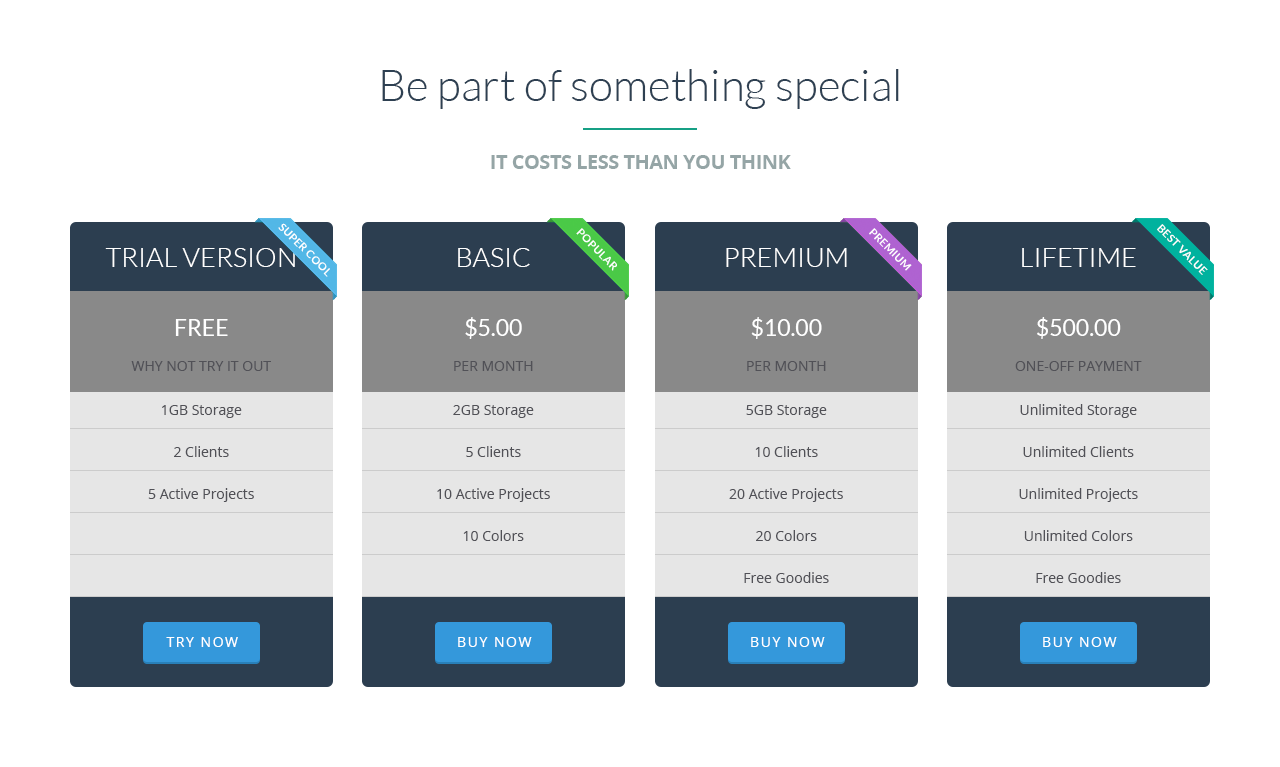
<style>
.page{position:relative;width:1280px;height:767px;background:#ffffff}
.page>*{position:absolute;margin:0}
.t1{font:44px "Lato-Light";color:#2e4052}
.t2{font:20px "OpenSans-Bold";letter-spacing:-0.025em;color:#95a5a6}
.t3{font:11px "Lato-Bold";letter-spacing:0.025em;color:#ffffff}
.t4{font:27px "Lato-Light";color:#ffffff}
.t5{font:14px/35px "OpenSans";color:#515157}
.t6{font:23px/35px "Lato-Regular";color:#ffffff}
.t7{font:14px/42px "OpenSans";color:#515157}
.t8{font:14px "OpenSans";letter-spacing:0.11em;color:#ffffff}
</style>
<div class="page">
<p class="t1" style="left:382px;top:69px;width:517px;height:40px">Be part of something special</p>
<p class="t2" style="left:491px;top:155px;width:300px;height:14px">IT COSTS LESS THAN YOU THINK</p>
<p class="t3" style="left:278px;top:223px;width:52px;height:54px;rotate:45deg">SUPER COOL</p>
<p class="t3" style="left:576px;top:228px;width:41px;height:43px;rotate:45deg">POPULAR</p>
<p class="t3" style="left:869px;top:228px;width:43px;height:43px;rotate:45deg">PREMIUM</p>
<p class="t3" style="left:1157px;top:224px;width:51px;height:51px;rotate:45deg">BEST VALUE</p>
<p class="t4" style="left:105px;top:248px;width:190px;height:19px">TRIAL VERSION</p>
<p class="t4" style="left:458px;top:248px;width:72px;height:19px">BASIC</p>
<p class="t4" style="left:726px;top:248px;width:121px;height:19px">PREMIUM</p>
<p class="t4" style="left:1022px;top:248px;width:114px;height:19px">LIFETIME</p>
<p class="t5" style="left:454px;top:317px;width:79px;height:54px;text-align:center"><span class="t6">$5.00<br></span>PER MONTH</p>
<p class="t5" style="left:747px;top:317px;width:79px;height:54px;text-align:center"><span class="t6">$10.00<br></span>PER MONTH</p>
<p class="t5" style="left:1015px;top:317px;width:127px;height:54px;text-align:center"><span class="t6">$500.00<br></span>ONE-OFF PAYMENT</p>
<p class="t7" style="left:148px;top:405px;width:106px;height:97px;text-align:center">1GB Storage<br>2 Clients<br>5 Active Projects</p>
<p class="t7" style="left:437px;top:405px;width:113px;height:136px;text-align:center">2GB Storage<br>5 Clients<br>10 Active Projects<br>10 Colors</p>
<p class="t7" style="left:729px;top:405px;width:114px;height:178px;text-align:center">5GB Storage<br>10 Clients<br>20 Active Projects<br>20 Colors<br>Free Goodies</p>
<p class="t7" style="left:1019px;top:404px;width:119px;height:179px;text-align:center">Unlimited Storage<br>Unlimited Clients<br>Unlimited Projects<br>Unlimited Colors<br>Free Goodies</p>
<p class="t8" style="left:166px;top:637px;width:72px;height:10px">TRY NOW</p>
<p class="t8" style="left:458px;top:637px;width:74px;height:10px">BUY NOW</p>
<p class="t8" style="left:751px;top:637px;width:74px;height:10px">BUY NOW</p>
<p class="t8" style="left:1043px;top:637px;width:74px;height:10px">BUY NOW</p>
</div>
